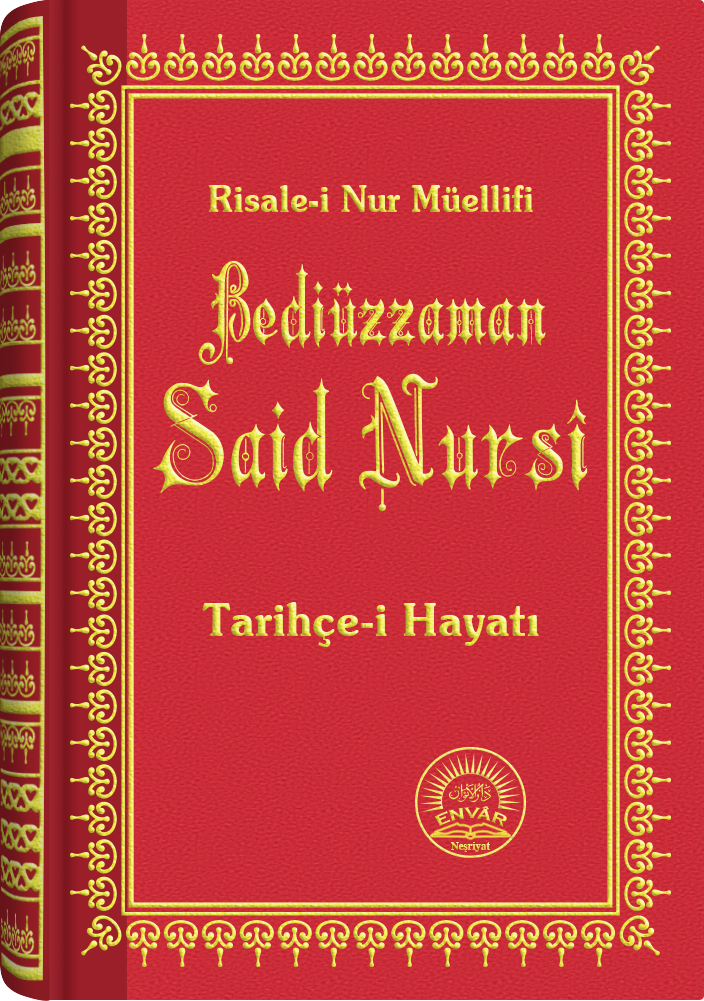
<style>
.page{position:relative;width:704px;height:1001px}
.page>*{position:absolute;margin:0}
.t1{font:35.6px "SouvenirITCbyBT-Demi";scale:0.94 1}
.t2{font:104.8px/91.2px "Barla © 001 Liva Nur";letter-spacing:-0.001em;scale:0.93 1}
.t3{font:142.2px/141.8px "Barla © 001 Liva Nur";letter-spacing:-0.001em;scale:0.93 1}
.t4{font:46.5px "SouvenirITCbyBT-Demi";scale:0.93 1}
.t5{font:15.6px "CopperplateGothic-Bold"}
.t6{font:11.2px "Times-Bold";scale:0.96 1}
</style>
<div class="page">
<p class="t1" style="left:208px;top:185px;width:325px;height:27px">Risale-i Nur Müellifi</p>
<p class="t2" style="left:153px;top:261px;width:435px;height:251px;text-align:center">Bediüzzaman<br><span class="t3">Said Nursî</span></p>
<p class="t4" style="left:202px;top:602px;width:337px;height:45px">Tarihçe-i Hayatı</p>
<p class="t5" style="left:434px;top:806px;width:73px;height:21px">ENVÂR</p>
<p class="t6" style="left:451px;top:842px;width:39px;height:10px">Neşriyat</p>
</div>
